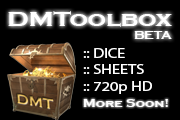
<style>
.page{position:relative;width:180px;height:120px;background:#000000}
.page>*{position:absolute;margin:0}
.t1{font:21.9px "CopperplateGothic-Bold";color:#ffffff;scale:1.17 1}
.t2{font:10.7px "CopperplateGothic-Bold";color:#ffffff;scale:1.17 1}
.t3{font:13.9px "MyriadPro-Regular";color:#ffffff;scale:1.17 1}
.t4{font:10.6px "CopperplateGothic-Bold";color:#ffffff;scale:1.25 1}
</style>
<div class="page">
<p class="t1" style="left:8px;top:11px;width:164px;height:16px">DMToolbox</p>
<p class="t2" style="left:134px;top:31px;width:38px;height:8px">BETA</p>
<p class="t3" style="left:83px;top:48px;width:69px;height:46px">:: DICE<br>:: SHEETS<br>:: 720p HD</p>
<p class="t4" style="left:83px;top:99px;width:85px;height:8px">More Soon!</p>
</div>
